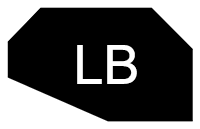
<style>
.page{position:relative;width:200px;height:129px;background:#000000}
.page>*{position:absolute;margin:0}
.t1{font:54.1px "ArialMT";color:#ffffff}
</style>
<div class="page">
<p class="t1" style="left:77px;top:45px;width:60px;height:39px">LB</p>
</div>
